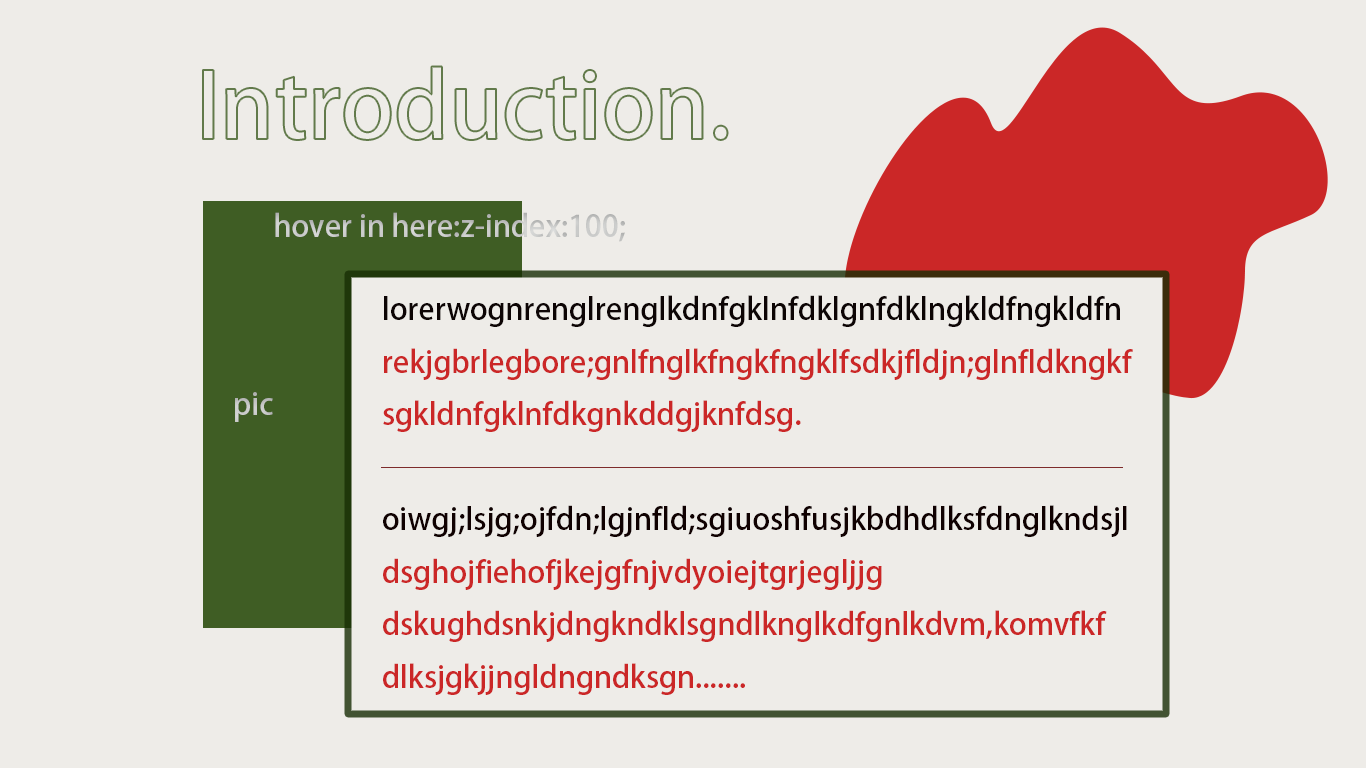
<style>
.page{position:relative;width:1366px;height:768px;background:#eeece8}
.page>*{position:absolute;margin:0}
.t1{font:30px "AdobeFanHeitiStd-Bold";color:#c9cac9}
.t2{font:30px "AdobeFanHeitiStd-Bold";color:#cb2727}
.t3{font:30px "AdobeFanHeitiStd-Bold";color:#0d0505}
.t4{font:30px "AdobeFanHeitiStd-Bold";color:#100101}
.t5{font:30px "AdobeFanHeitiStd-Bold";color:#cacbca}
</style>
<div class="page">
<p class="t1" style="left:275px;top:212px;width:350px;height:30px">hover in here:z-index:100;</p>
<p class="t2" style="left:383px;top:295px;width:750px;height:400px"><span class="t3">lorerwognrenglrenglkdnfgklnfdklgnfdklngkldfngkldfn<br></span>rekjgbrlegbore;gnlfnglkfngkfngklfsdkjfldjn;glnfldkngkf<br>sgkldnfgklnfdkgnkddgjknfdsg.<br><br><span class="t4">oiwgj;lsjg;ojfdn;lgjnfld;sgiuoshfusjkbdhdlksfdnglkndsjl<br></span>dsghojfiehofjkejgfnjvdyoiejtgrjegljjg<br>dskughdsnkjdngkndklsgndlknglkdfgnlkdvm,komvfkf<br>dlksjgkjjngldngndksgn.......</p>
<p class="t5" style="left:235px;top:392px;width:38px;height:30px">pic</p>
</div>
